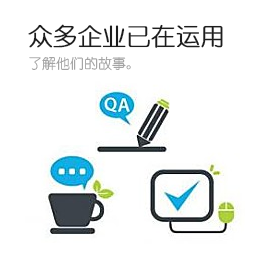
<style>
.page{position:relative;width:259px;height:259px;background:#ffffff}
.page>*{position:absolute;margin:0}
.t1{font:24px "YouYuan";color:#1d1d1d;font-weight:bold}
.t2{font:14px "YouYuan";color:#9d9d9d}
</style>
<div class="page">
<p class="t1" style="left:28px;top:24px;width:195px;height:24px">众多企业已在运用</p>
<p class="t2" style="left:29px;top:56px;width:102px;height:15px">了解他们的故事。</p>
</div>
